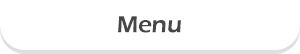
<style>
.page{position:relative;width:300px;height:54px;background:#ffffff}
.page>*{position:absolute;margin:0}
.t1{font:24px "ErasITC-Demi";color:#464646}
</style>
<div class="page">
<p class="t1" style="left:118px;top:16px;width:63px;height:17px">Menu</p>
</div>
